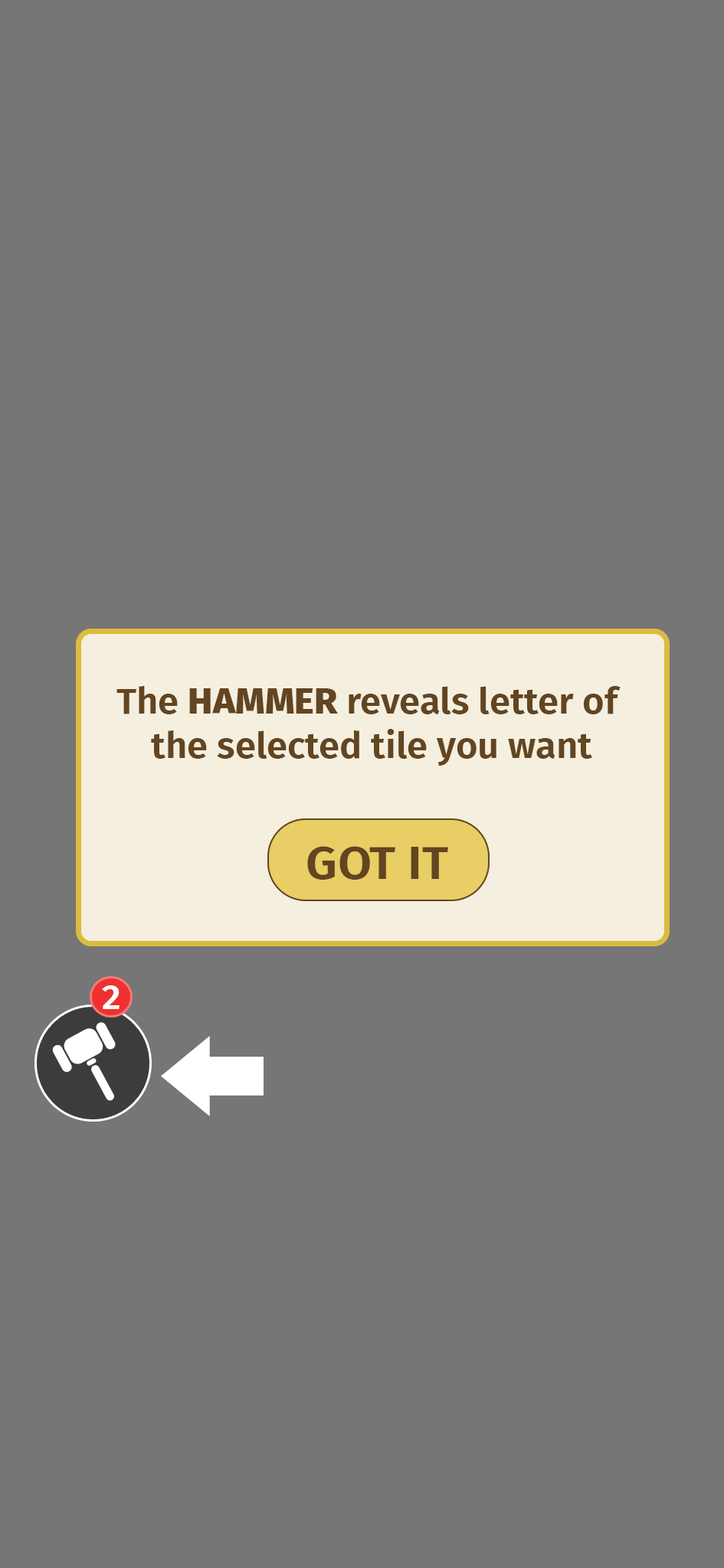
<style>
.page{position:relative;width:724px;height:1568px;background:#767676}
.page>*{position:absolute;margin:0}
.t1{font:35.6px "FiraSans-SemiBold";color:#624521;scale:1.05 1}
.t2{font:35.6px "FiraSans-ExtraBold";color:#624521;scale:1.05 1}
.t3{font:46.5px "FiraSans-SemiBold";color:#624521;scale:1.05 1}
.t4{font:35.1px "FiraSans-SemiBold";color:#ffffff;scale:1.05 1}
</style>
<div class="page">
<p class="t1" style="left:116px;top:686px;width:504px;height:80px;text-align:center">The <span class="t2">HAMMER</span> reveals letter of <br>the selected tile you want</p>
<p class="t3" style="left:307px;top:846px;width:141px;height:34px">GOT IT</p>
<p class="t4" style="left:102px;top:985px;width:17px;height:24px">2</p>
</div>
